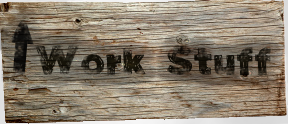
<style>
.page{position:relative;width:288px;height:124px}
.page>*{position:absolute;margin:0}
.t1{font:50px "ManhattanHand-Heavy";color:#1d1910}
</style>
<div class="page">
<p class="t1" style="left:35px;top:45px;width:236px;height:30px">Work Stuff</p>
</div>
